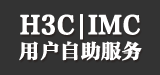
<style>
.page{position:relative;width:160px;height:75px;background:#333333}
.page>*{position:absolute;margin:0}
.t1{font:24px "FZFYSJW--GB1-0";color:#ffffff;font-weight:bold}
.t2{font:20px "FZFYSJW--GB1-0";color:#ffffff;font-weight:bold}
</style>
<div class="page">
<p class="t1" style="left:20px;top:14px;width:120px;height:26px">H3C|IMC</p>
<p class="t2" style="left:19px;top:41px;width:123px;height:20px">用户自助服务</p>
</div>
